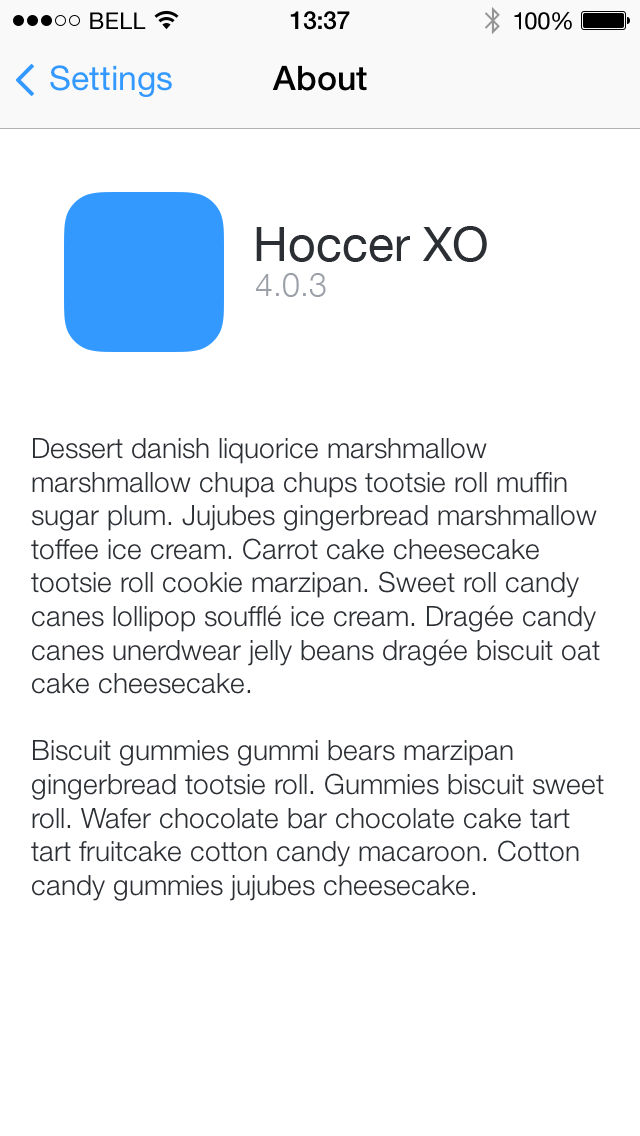
<style>
.page{position:relative;width:640px;height:1136px;background:#ffffff}
.page>*{position:absolute;margin:0}
.t1{font:33.8px "HelveticaNeue";color:#3399ff}
.t2{font:33.8px "HelveticaNeue-Medium";color:#000000}
.t3{font:48px "HelveticaNeue";color:#2b2e33}
.t4{font:32px "HelveticaNeue-Light";color:#9b9fa8}
.t5{font:28px "HelveticaNeue-Light";color:#2b2e33}
</style>
<div class="page">
<p class="t1" style="left:50px;top:65px;width:122px;height:32px">Settings</p>
<p class="t2" style="left:272px;top:65px;width:95px;height:26px">About</p>
<p class="t3" style="left:256px;top:226px;width:231px;height:36px">Hoccer XO</p>
<p class="t4" style="left:255px;top:273px;width:71px;height:24px">4.0.3</p>
<p class="t5" style="left:31px;top:438px;width:573px;height:463px">Dessert danish liquorice marshmallow marshmallow chupa chups tootsie roll muffin sugar plum. Jujubes gingerbread marshmallow toffee ice cream. Carrot cake cheesecake tootsie roll cookie marzipan. Sweet roll candy canes lollipop soufflé ice cream. Dragée candy canes unerdwear jelly beans dragée biscuit oat cake cheesecake.<br><br>Biscuit gummies gummi bears marzipan gingerbread tootsie roll. Gummies biscuit sweet roll. Wafer chocolate bar chocolate cake tart tart fruitcake cotton candy macaroon. Cotton candy gummies jujubes cheesecake.</p>
</div>
